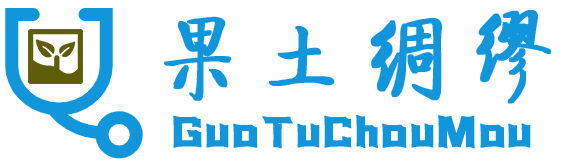
<style>
.page{position:relative;width:566px;height:168px;background:#ffffff}
.page>*{position:absolute;margin:0}
.t1{font:96.6px "FZQTJW--GB1-0";letter-spacing:0.05em;color:#1296db;font-weight:bold}
.t2{font:50px "076-SSZhanRenTi";letter-spacing:0.05em;color:#1296db;font-weight:bold}
</style>
<div class="page">
<p class="t1" style="left:164px;top:10px;width:387px;height:94px">果土绸缪</p>
<p class="t2" style="left:173px;top:115px;width:358px;height:34px">GuoTuChouMou</p>
</div>
